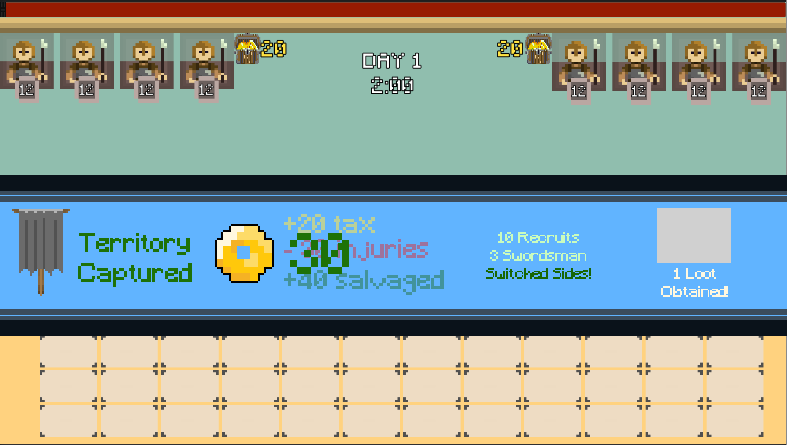
<style>
.page{position:relative;width:787px;height:445px;background:#90beae}
.page>*{position:absolute;margin:0}
.t1{font:25px "Minecraft";color:#bad09a}
.t2{font:25px "Minecraft";color:#1e7208}
.t3{font:55px "Minecraft";color:#1e7208}
.t4{font:15px "Minecraft";color:#cafcbd}
.t5{font:15px "Minecraft";color:#186604}
.t6{font:25px "Minecraft";color:#9e729c}
.t7{font:25px "Minecraft";color:#42939c}
.t8{font:15px "Minecraft";color:#fff8df}
</style>
<div class="page">
<p class="t1" style="left:284px;top:214px;width:91px;height:19px">+20 tax</p>
<p class="t2" style="left:78px;top:233px;width:114px;height:54px;text-align:center">Territory<br>Captured</p>
<p class="t3" style="left:290px;top:233px;width:59px;height:41px">30</p>
<p class="t4" style="left:486px;top:232px;width:105px;height:47px;text-align:center">10 Recruits<br>3 Swordsman<br><span class="t5">Switched Sides!</span></p>
<p class="t6" style="left:284px;top:239px;width:144px;height:22px">- 30 injuries</p>
<p class="t7" style="left:284px;top:270px;width:160px;height:25px">+40 salvaged</p>
<p class="t8" style="left:661px;top:268px;width:67px;height:29px;text-align:center">1 Loot<br>Obtained!</p>
</div>
